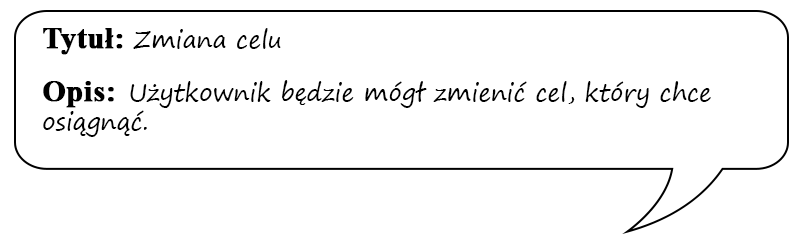
<style>
.page{position:relative;width:800px;height:242px;background:#ffffff}
.page>*{position:absolute;margin:0}
.t1{font:24px "SegoePrint";color:#000000}
.t2{font:30px "TimesNewRomanPS-BoldMT";color:#000000;font-weight:bold}
</style>
<div class="page">
<p class="t1" style="left:43px;top:28px;width:668px;height:109px"><span class="t2">Tytuł: </span>Zmiana celu<br><br><span class="t2">Opis:  </span>Użytkownik będzie mógł zmienić cel, który chce osiągnąć.</p>
</div>
